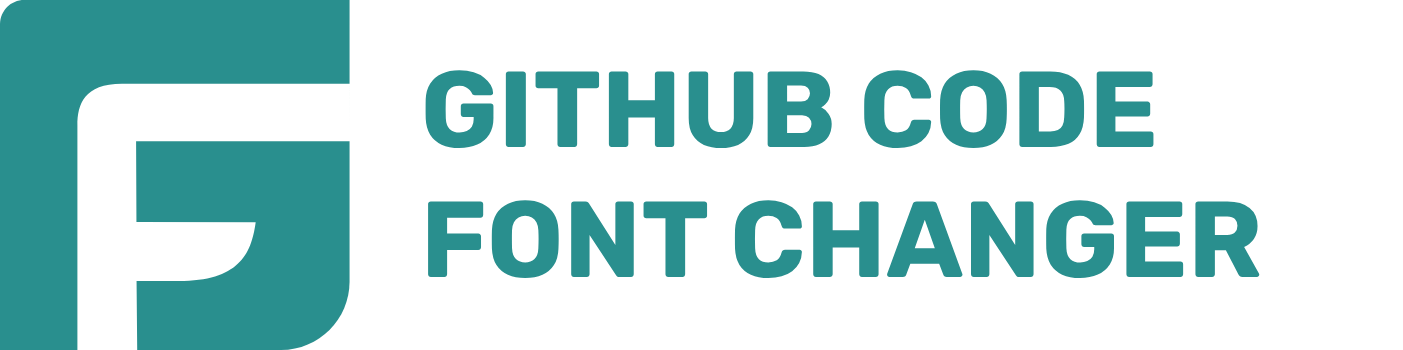
<style>
.page{position:relative;width:1403px;height:350px;background:#ffffff}
.page>*{position:absolute;margin:0}
.t1{font:108px "Rubik-Bold";color:#298f8e;text-transform:uppercase}
</style>
<div class="page">
<p class="t1" style="left:425px;top:70px;width:835px;height:209px">Github code font changer</p>
</div>
